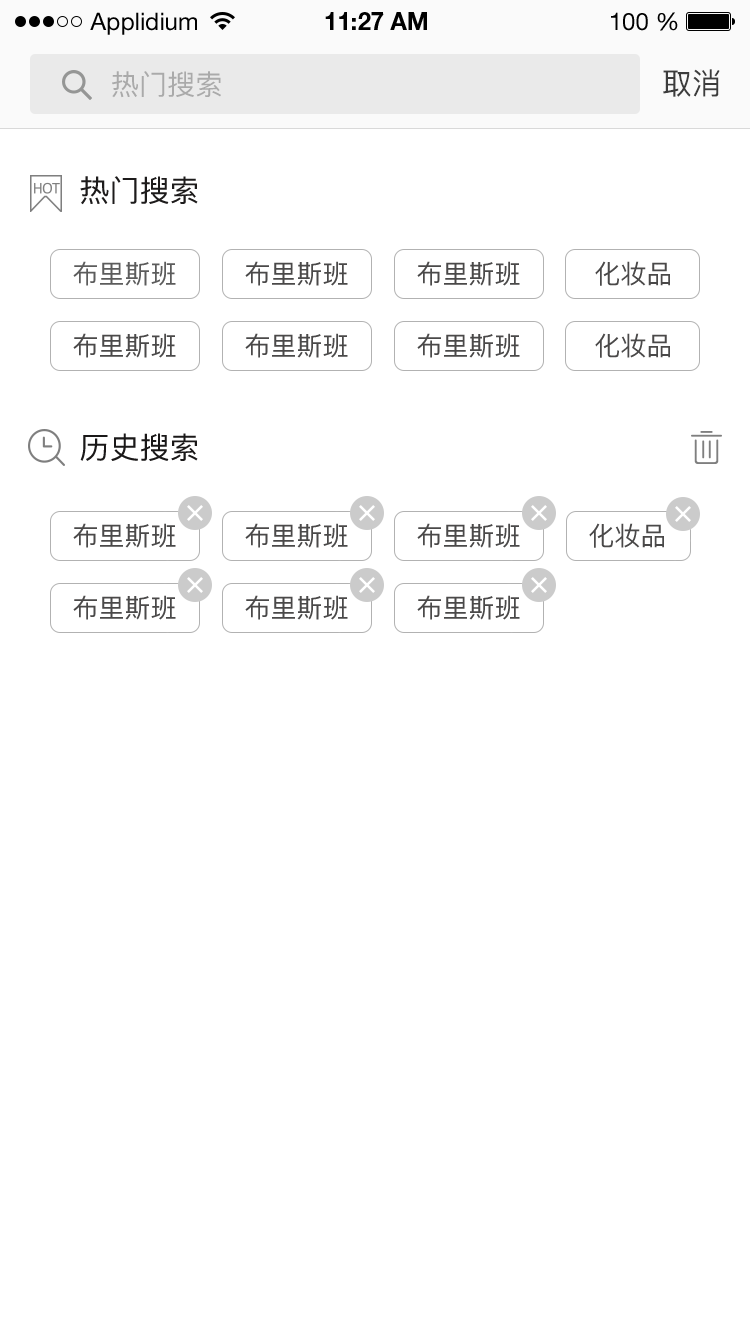
<style>
.page{position:relative;width:750px;height:1334px;background:#ffffff}
.page>*{position:absolute;margin:0}
.t1{font:24px "HelveticaNeueLTStd-Roman";color:#000000}
.t2{font:24px "HelveticaNeueLTStd-Bd";color:#000000}
.t3{font:28px "PingFangSC-Regular";color:#aaaaaa}
.t4{font:30px "PingFangSC-Regular";color:#3c3c3c}
.t5{font:30px "PingFangSC-Regular";color:#1d1b1b}
.t6{font:26px "PingFangSC-Regular";color:#5c5c5c}
.t7{font:26px "PingFangSC-Regular";color:#4a4949}
.t8{font:30px "PingFangSC-Regular";color:#1a1818}
</style>
<div class="page">
<p class="t1" style="left:90px;top:12px;width:107px;height:23px">Applidium</p>
<p class="t2" style="left:325px;top:12px;width:102px;height:18px">11:27 AM</p>
<p class="t1" style="left:611px;top:12px;width:67px;height:19px">100 %</p>
<p class="t3" style="left:112px;top:71px;width:109px;height:27px">热门搜索</p>
<p class="t4" style="left:663px;top:69px;width:57px;height:28px">取消</p>
<p class="t5" style="left:80px;top:176px;width:118px;height:29px">热门搜索</p>
<p class="t6" style="left:73px;top:261px;width:103px;height:25px">布里斯班</p>
<p class="t7" style="left:245px;top:261px;width:103px;height:25px">布里斯班</p>
<p class="t7" style="left:417px;top:261px;width:103px;height:25px">布里斯班</p>
<p class="t7" style="left:595px;top:261px;width:75px;height:25px">化妆品</p>
<p class="t7" style="left:73px;top:333px;width:103px;height:25px">布里斯班</p>
<p class="t7" style="left:245px;top:333px;width:103px;height:25px">布里斯班</p>
<p class="t7" style="left:417px;top:333px;width:103px;height:25px">布里斯班</p>
<p class="t7" style="left:595px;top:333px;width:75px;height:25px">化妆品</p>
<p class="t8" style="left:80px;top:433px;width:118px;height:28px">历史搜索</p>
<p class="t7" style="left:73px;top:523px;width:103px;height:25px">布里斯班</p>
<p class="t7" style="left:245px;top:523px;width:103px;height:25px">布里斯班</p>
<p class="t7" style="left:417px;top:523px;width:103px;height:25px">布里斯班</p>
<p class="t7" style="left:589px;top:523px;width:75px;height:25px">化妆品</p>
<p class="t7" style="left:73px;top:595px;width:103px;height:25px">布里斯班</p>
<p class="t7" style="left:245px;top:595px;width:103px;height:25px">布里斯班</p>
<p class="t7" style="left:417px;top:595px;width:103px;height:25px">布里斯班</p>
</div>
